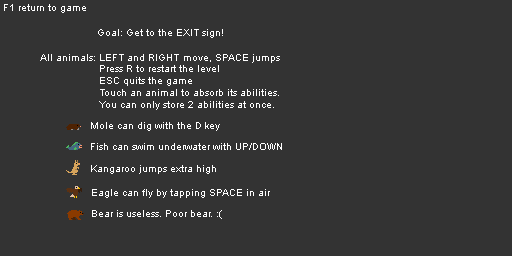
<style>
.page{position:relative;width:512px;height:256px;background:#333333}
.page>*{position:absolute;margin:0}
.t1{font:10px "ArialMT";color:#ffffff}
</style>
<div class="page">
<p class="t1" style="left:4px;top:4px;width:82px;height:9px">F1 return to game</p>
<p class="t1" style="left:98px;top:29px;width:125px;height:9px">Goal: Get to the EXIT sign!</p>
<p class="t1" style="left:40px;top:54px;width:240px;height:9px">All animals: LEFT and RIGHT move, SPACE jumps</p>
<p class="t1" style="left:99px;top:65px;width:180px;height:45px">Press R to restart the level<br>ESC quits the game<br>Touch an animal to absorb its abilities.<br>You can only store 2 abilities at once.</p>
<p class="t1" style="left:91px;top:122px;width:129px;height:9px">Mole can dig with the D key</p>
<p class="t1" style="left:91px;top:143px;width:191px;height:7px">Fish can swim underwater with UP/DOWN</p>
<p class="t1" style="left:91px;top:165px;width:125px;height:9px">Kangaroo jumps extra high</p>
<p class="t1" style="left:92px;top:189px;width:178px;height:9px">Eagle can fly by tapping SPACE in air</p>
<p class="t1" style="left:92px;top:210px;width:130px;height:9px">Bear is useless. Poor bear. :(</p>
</div>
